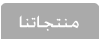
<style>
.page{position:relative;width:100px;height:40px;background:#aaaaaa}
.page>*{position:absolute;margin:0}
.t1{font:22px "EngraversMT";color:#ffffff}
</style>
<div class="page">
<p class="t1" style="left:19px;top:15px;width:60px;height:16px">منتجاتنا</p>
</div>
